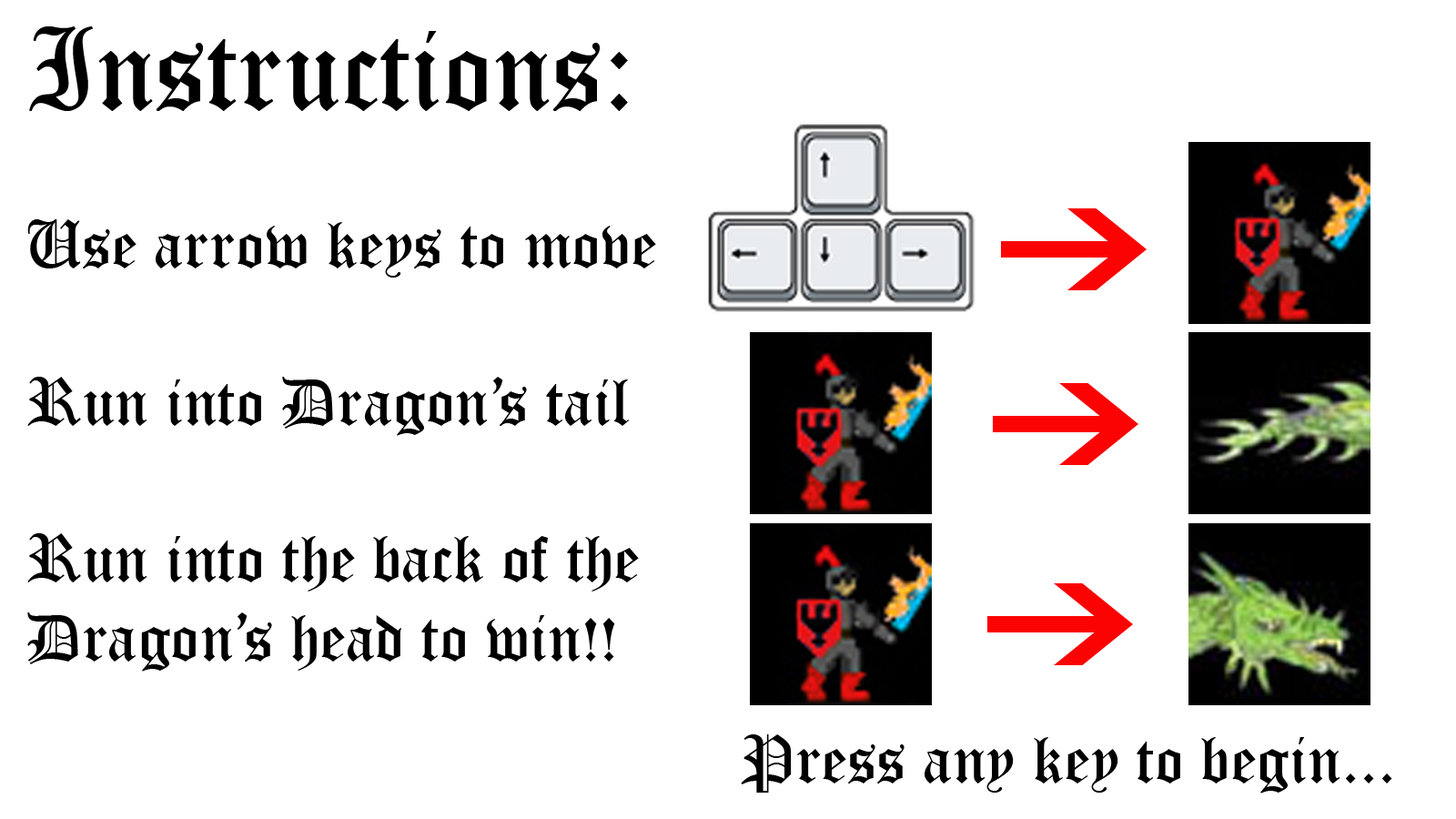
<style>
.page{position:relative;width:1456px;height:819px;background:#ffffff}
.page>*{position:absolute;margin:0}
.t1{font:65.5px "OldEnglishTextMT";color:#000000}
.t2{font:113.7px "OldEnglishTextMT";color:#000000}
.t3{font:65.5px "OldEnglishTextMT";color:#010101}
</style>
<div class="page">
<p class="t1" style="left:27px;top:26px;width:629px;height:646px"><span class="t2">Instructions:<br></span><br>Use arrow keys to move<br><br>Run into Dragon’s tail<br><br>Run into the back of the<br>Dragon’s head to win!!</p>
<p class="t3" style="left:741px;top:734px;width:651px;height:60px">Press any key to begin...</p>
</div>
